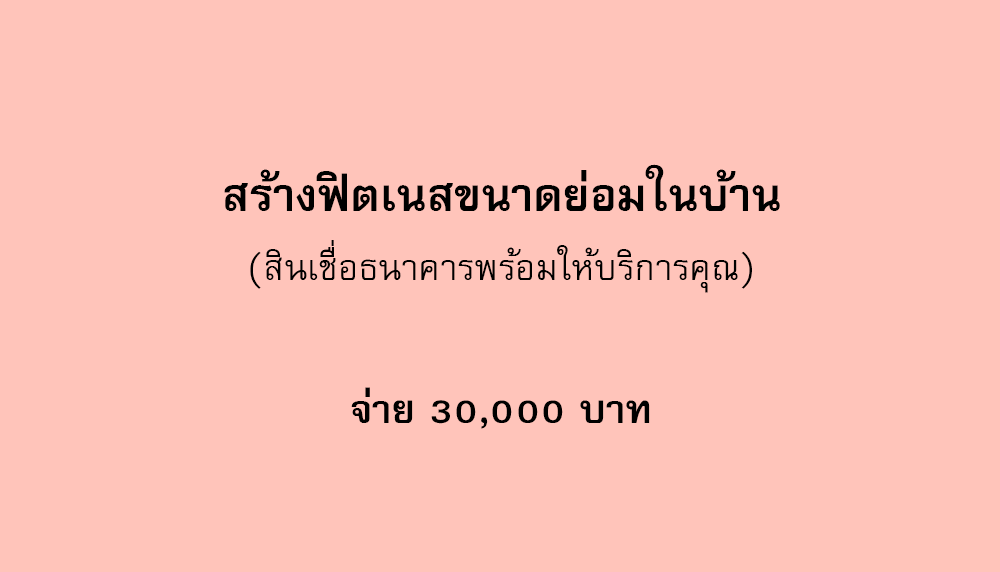
<style>
.page{position:relative;width:1000px;height:572px;background:#ffc4ba}
.page>*{position:absolute;margin:0}
.t1{font:64px "FreesiaUPCBold";color:#000000}
.t2{font:50px "FreesiaUPC";color:#000000}
.t3{font:56px "FreesiaUPCBold";color:#000000}
</style>
<div class="page">
<p class="t1" style="left:224px;top:164px;width:556px;height:47px">สร้างฟิตเนสขนาดย่อมในบ้าน</p>
<p class="t2" style="left:250px;top:240px;width:502px;height:53px">(สินเชื่อธนาคารพร้อมให้บริการคุณ)</p>
<p class="t3" style="left:351px;top:387px;width:299px;height:42px">จ่าย 30,000 บาท</p>
</div>
